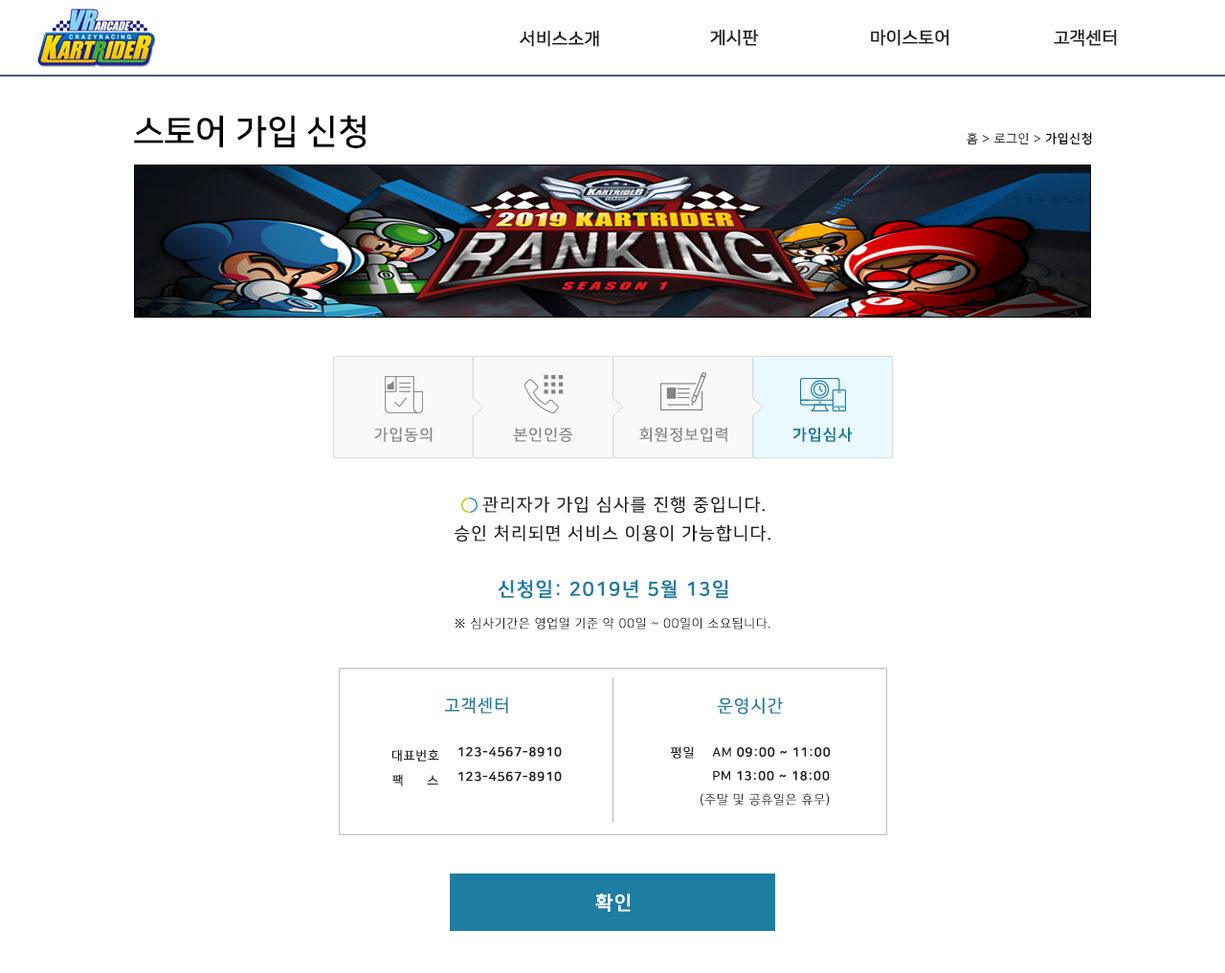
<style>
.page{position:relative;width:1225px;height:973px;background:#ffffff}
.page>*{position:absolute;margin:0}
.t1{font:17.2px "NanumSquareR";color:#222222;font-weight:bold}
.t2{font:34.5px "NanumSquareB";color:#000000}
.t3{font:12.4px "NanumSquareR";letter-spacing:0.05em;color:#000000}
.t4{font:12.4px "NanumSquareB";letter-spacing:0.05em;color:#000000}
.t5{font:15.3px "NanumSquareR";letter-spacing:0.05em;color:#838383;text-transform:uppercase;font-weight:bold}
.t6{font:15.3px "NanumSquareB";letter-spacing:0.05em;color:#1d7ca2;text-transform:uppercase;font-weight:bold}
.t7{font:17.2px/28.7px "NanumSquareR";letter-spacing:0.05em;color:#222222;text-transform:uppercase;font-weight:bold}
.t8{font:19.1px "NanumSquareB";letter-spacing:0.05em;color:#1d7ca2;text-transform:uppercase;font-weight:bold}
.t9{font:12.4px "NanumSquareL";letter-spacing:0.05em;color:#222222;text-transform:uppercase;font-weight:bold}
.t10{font:17.2px "NanumSquareR";letter-spacing:0.05em;color:#1d7ca2;text-transform:uppercase;font-weight:bold}
.t11{font:12.4px "NanumSquareR";letter-spacing:0.05em;color:#222222;text-transform:uppercase;font-weight:bold}
.t12{font:12.4px "NanumSquareB";letter-spacing:0.05em;color:#222222;text-transform:uppercase;font-weight:bold}
.t13{font:12.4px "NanumSquareR";letter-spacing:1.9em;color:#222222;text-transform:uppercase;font-weight:bold}
.t14{font:19.1px "NanumSquareB";letter-spacing:0.05em;color:#ffffff;text-transform:uppercase;font-weight:bold}
</style>
<div class="page">
<p class="t1" style="left:520px;top:30px;width:79px;height:17px">서비스소개</p>
<p class="t1" style="left:710px;top:29px;width:49px;height:17px">게시판</p>
<p class="t1" style="left:871px;top:29px;width:78px;height:17px">마이스토어</p>
<p class="t1" style="left:1054px;top:29px;width:63px;height:17px">고객센터</p>
<p class="t2" style="left:134px;top:115px;width:232px;height:33px">스토어 가입 신청</p>
<p class="t3" style="left:967px;top:132px;width:125px;height:13px">홈 &gt; 로그인 &gt; <span class="t4">가입신청</span></p>
<p class="t5" style="left:374px;top:427px;width:59px;height:15px">가입동의</p>
<p class="t5" style="left:513px;top:427px;width:60px;height:15px">본인인증</p>
<p class="t5" style="left:639px;top:427px;width:88px;height:15px">회원정보입력</p>
<p class="t6" style="left:793px;top:427px;width:60px;height:15px">가입심사</p>
<p class="t7" style="left:455px;top:497px;width:315px;height:46px;text-align:center">관리자가 가입 심사를 진행 중입니다.<br>승인 처리되면 서비스 이용이 가능합니다.</p>
<p class="t8" style="left:498px;top:580px;width:230px;height:19px">신청일: 2019년 5월 13일</p>
<p class="t9" style="left:455px;top:617px;width:315px;height:13px">※ 심사기간은 영업일 기준 약 00일 ~ 00일이 소요됩니다.</p>
<p class="t10" style="left:444px;top:698px;width:64px;height:16px">고객센터</p>
<p class="t10" style="left:718px;top:698px;width:65px;height:17px">운영시간</p>
<p class="t11" style="left:391px;top:749px;width:48px;height:13px">대표번호</p>
<p class="t12" style="left:458px;top:747px;width:104px;height:10px">123-4567-8910</p>
<p class="t11" style="left:671px;top:747px;width:23px;height:12px">평일</p>
<p class="t12" style="left:712px;top:747px;width:119px;height:10px"><span class="t11">AM </span>09:00 ~ 11:00</p>
<p class="t12" style="left:458px;top:771px;width:104px;height:11px">123-4567-8910</p>
<p class="t12" style="left:713px;top:770px;width:117px;height:11px"><span class="t11">pM </span>13:00 ~ 18:00</p>
<p class="t13" style="left:392px;top:774px;width:46px;height:13px">팩<span class="t11">스</span></p>
<p class="t9" style="left:701px;top:793px;width:129px;height:13px">(주말 및 공휴일은 휴무)</p>
<p class="t14" style="left:595px;top:894px;width:36px;height:18px">확인</p>
</div>
